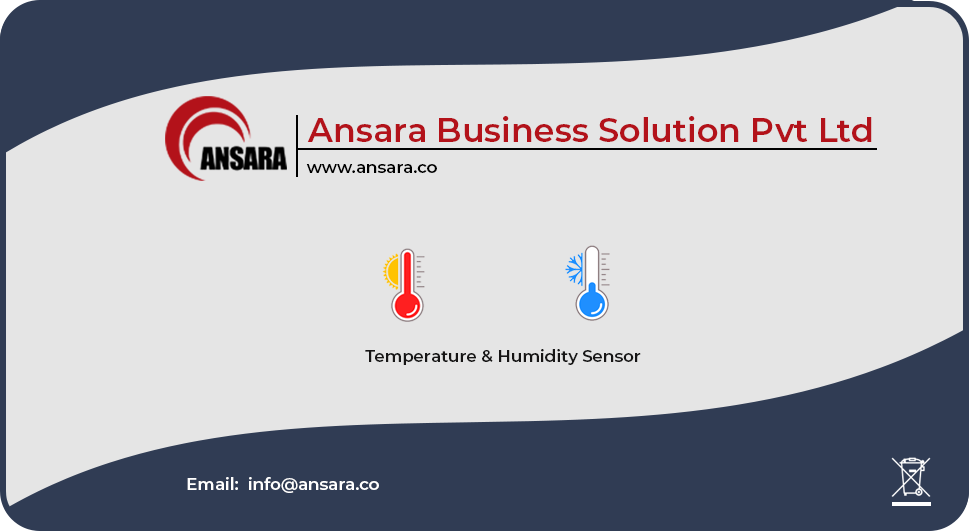
<style>
.page{position:relative;width:969px;height:531px;background:#e5e5e5}
.page>*{position:absolute;margin:0}
.t1{font:33.3px "Montserrat-SemiBold";color:#b3121a}
.t2{font:16.7px "Montserrat-SemiBold";color:#000000}
.t3{font:16.7px "Montserrat-SemiBold";color:#161515}
.t4{font:16.7px "Montserrat-SemiBold";color:#ffffff}
</style>
<div class="page">
<p class="t1" style="left:307px;top:116px;width:565px;height:26px">Ansara Business Solution Pvt Ltd</p>
<p class="t2" style="left:306px;top:164px;width:131px;height:9px">www.ansara.co</p>
<p class="t3" style="left:365px;top:349px;width:276px;height:16px">Temperature &amp; Humidity Sensor</p>
<p class="t4" style="left:187px;top:477px;width:192px;height:16px">Email:  info@ansara.co</p>
</div>
